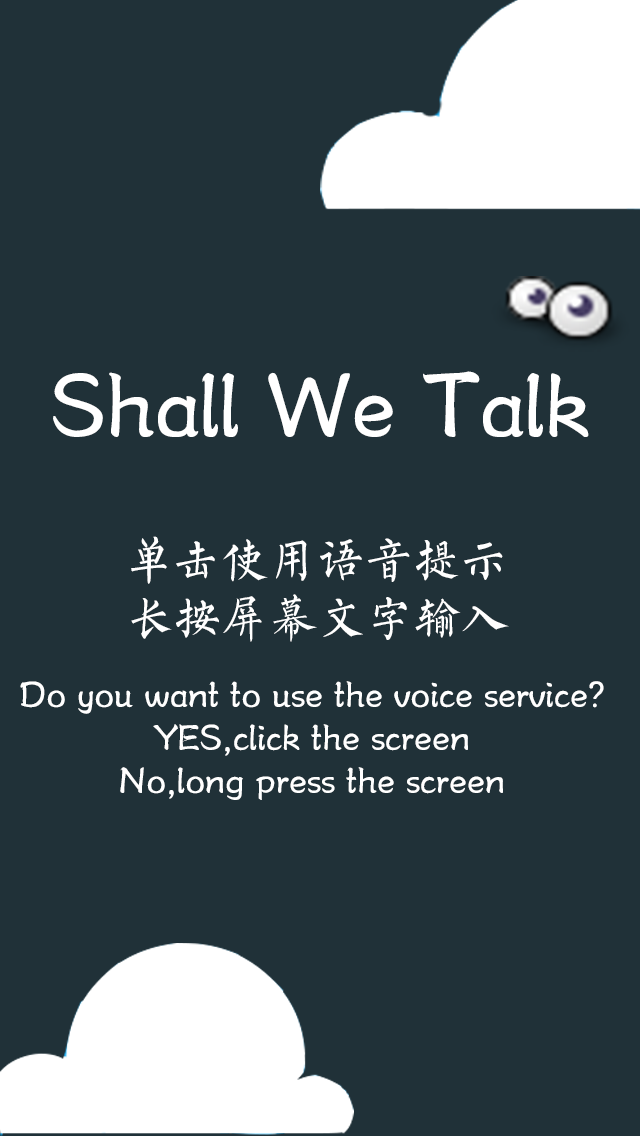
<style>
.page{position:relative;width:640px;height:1136px;background:#203138}
.page>*{position:absolute;margin:0}
.t1{font:90px "FZSXSLKJW--GB1-0";color:#ffffff}
.t2{font:48px "FZSXSLKJW--GB1-0";color:#ffffff}
.t3{font:36px "FZSXSLKJW--GB1-0";color:#ffffff}
</style>
<div class="page">
<p class="t1" style="left:53px;top:371px;width:536px;height:66px">Shall We Talk</p>
<p class="t2" style="left:131px;top:536px;width:378px;height:106px">单击使用语音提示<br>长按屏幕文字输入</p>
<p class="t3" style="left:20px;top:681px;width:584px;height:119px;text-align:center">Do you want to use the voice service?<br>YES,click the screen<br>No,long press the screen</p>
</div>
